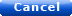
<style>
.page{position:relative;width:72px;height:16px}
.page>*{position:absolute;margin:0}
.t1{font:11px "Verdana-Bold";letter-spacing:0.1em;color:#ffffff}
</style>
<div class="page">
<p class="t1" style="left:14px;top:2px;width:46px;height:9px">Cancel</p>
</div>
